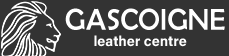
<style>
.page{position:relative;width:229px;height:56px;background:#333333}
.page>*{position:absolute;margin:0}
.t1{font:30.2px "BerlinSansFB-Reg";color:#ffffff}
.t2{font:14.3px "AcuminConcept-Bold";color:#ffffff}
</style>
<div class="page">
<p class="t1" style="left:65px;top:8px;width:160px;height:22px">GASCOIGNE</p>
<p class="t2" style="left:94px;top:35px;width:93px;height:12px">leather centre</p>
</div>
